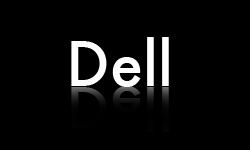
<style>
.page{position:relative;width:250px;height:150px;background:#000000}
.page>*{position:absolute;margin:0}
.t1{font:60px "Futura-Medium";color:#ffffff}
</style>
<div class="page">
<p class="t1" style="left:71px;top:37px;width:98px;height:50px">Dell</p>
</div>
